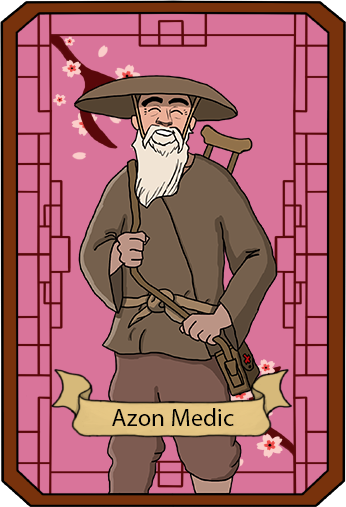
<style>
.page{position:relative;width:346px;height:507px;background:#d9749a}
.page>*{position:absolute;margin:0}
.t1{font:25px "MyriadPro-Regular";color:#000000}
</style>
<div class="page">
<p class="t1" style="left:112px;top:408px;width:122px;height:18px">Azon Medic</p>
</div>
